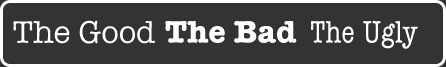
<style>
.page{position:relative;width:446px;height:67px;background:#333333}
.page>*{position:absolute;margin:0}
.t1{font:32px "AmericanTypewriter";color:#ffffff}
.t2{font:32px "AmericanTypewriter-Bold";color:#ffffff}
.t3{font:32px "AmericanTypewriter-Condensed";color:#ffffff}
</style>
<div class="page">
<p class="t1" style="left:13px;top:20px;width:142px;height:24px">The Good</p>
<p class="t2" style="left:165px;top:21px;width:132px;height:22px">The Bad</p>
<p class="t3" style="left:311px;top:21px;width:107px;height:28px">The Ugly</p>
</div>
